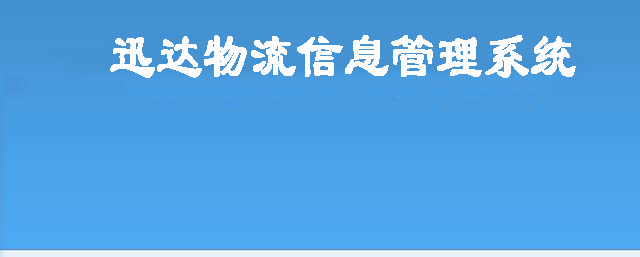
<style>
.page{position:relative;width:640px;height:257px}
.page>*{position:absolute;margin:0}
.t1{font:65px "LiSu";color:#fdfcfc;font-weight:bold;scale:0.7 1}
</style>
<div class="page">
<p class="t1" style="left:110px;top:35px;width:466px;height:43px">迅达物流信息管理系统</p>
</div>
